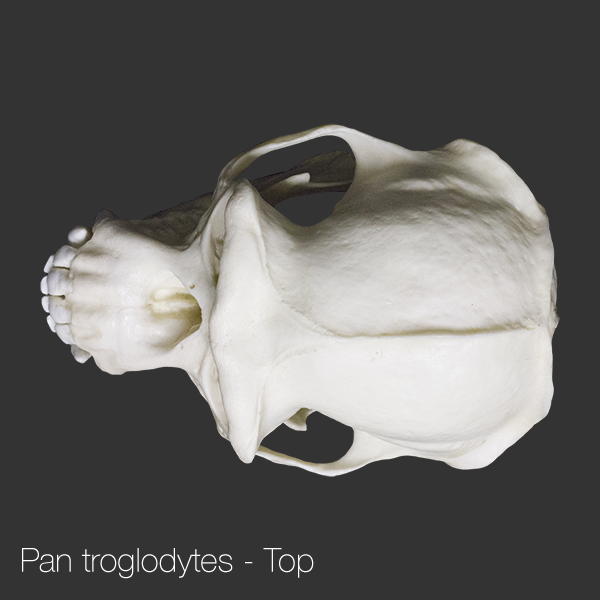
<style>
.page{position:relative;width:600px;height:600px;background:#333333}
.page>*{position:absolute;margin:0}
.t1{font:33.3px "HelveticaNeue-Thin";color:#ffffff}
</style>
<div class="page">
<p class="t1" style="left:22px;top:548px;width:292px;height:31px">Pan troglodytes - Top</p>
</div>
